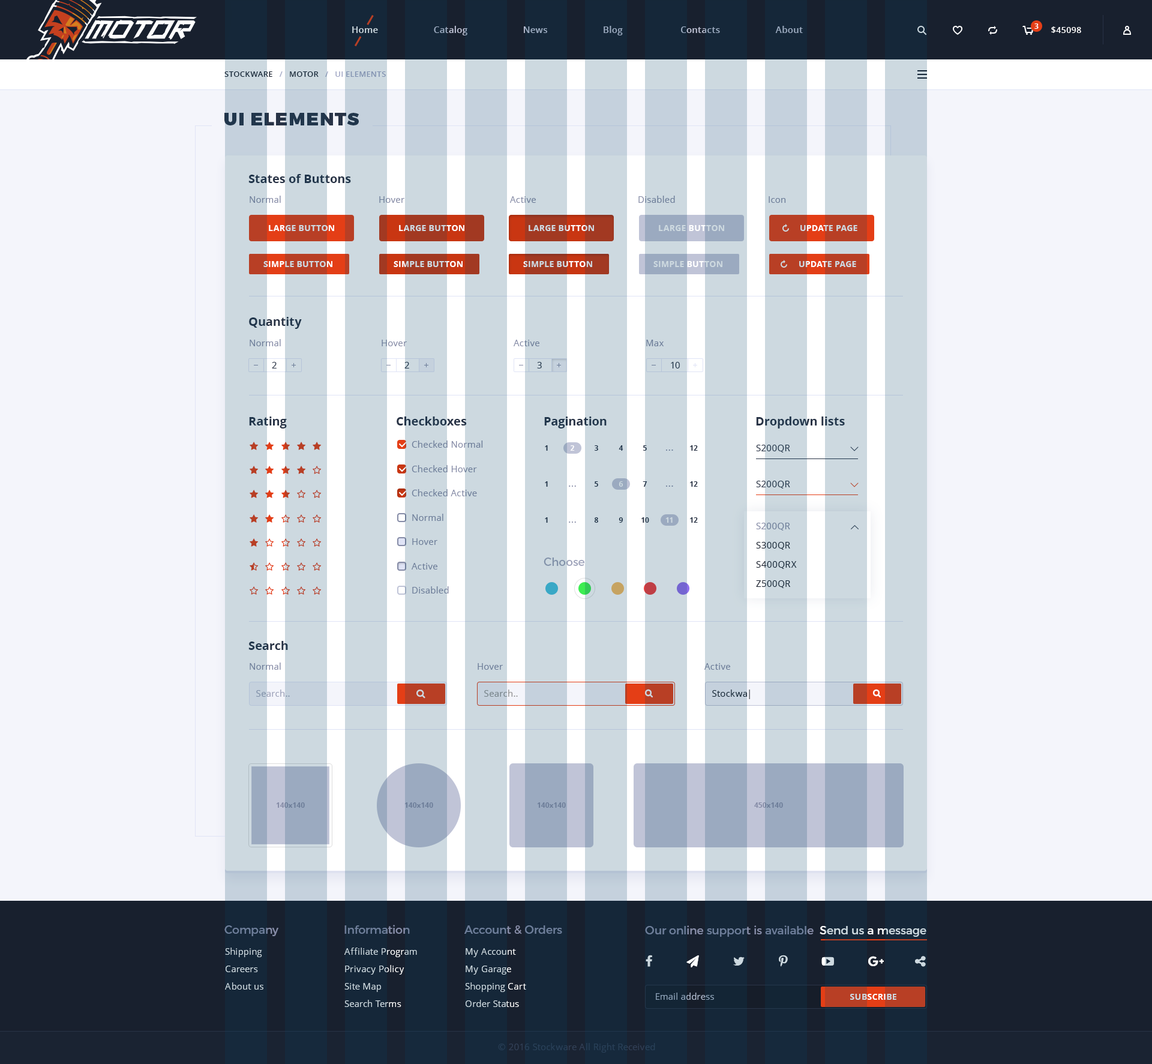
<style>
.page{position:relative;width:1152px;height:1064px;background:#f4f5fb}
.page>*{position:absolute;margin:0}
.t1{font:9px "OpenSans-Semibold";letter-spacing:0.02em}
.t2{font:7.2px "OpenSans-Bold";color:#ffffff}
.t3{font:8.4px "OpenSans-Semibold";letter-spacing:0.02em;color:#ffffff;text-transform:uppercase}
.t4{font:7.8px "OpenSans-Semibold";letter-spacing:0.02em;text-transform:uppercase}
.t5{font:18px "Montserrat-Black";letter-spacing:0.06em;color:#283346;text-transform:uppercase}
.t6{font:12px "OpenSans-Bold";color:#283346}
.t7{font:9px "OpenSans";letter-spacing:0.02em}
.t8{font:9px "OpenSans";letter-spacing:0.02em;color:#868ca7}
.t9{font:9px "OpenSans";letter-spacing:0.02em;color:#6d7d99}
.t10{font:8.4px "OpenSans-Bold";letter-spacing:0.02em;text-transform:uppercase}
.t11{font:8.4px "OpenSans-Bold";letter-spacing:0.02em;color:#cdd9e0;text-transform:uppercase}
.t12{font:8.4px "OpenSans-Bold";letter-spacing:0.02em}
.t13{font:8.4px "OpenSans-Bold";letter-spacing:0.02em;color:#cdd9e0}
.t14{font:9px "OpenSans";letter-spacing:0.02em;color:#283346}
.t15{font:7.2px "OpenSans-Bold";letter-spacing:0.02em;color:#283346;text-transform:uppercase}
.t16{font:7.2px "OpenSans-Bold";letter-spacing:0.02em;color:#ffffff;text-transform:uppercase}
.t17{font:7.2px "OpenSans-Bold";letter-spacing:0.1em;color:#6d7d99;text-transform:uppercase}
.t18{font:7.2px "OpenSans-Bold";letter-spacing:0.1em;color:#868ca7;text-transform:uppercase}
.t19{font:7.2px "OpenSans-Bold";letter-spacing:0.02em;color:#cdd9e0;text-transform:uppercase}
.t20{font:9px/19.2px "OpenSans";letter-spacing:0.02em;color:#18202e}
.t21{font:9px/19.2px "OpenSans";letter-spacing:0.02em;color:#868ca7}
.t22{font:11.4px "Montserrat-Regular"}
.t23{font:9px "OpenSans";letter-spacing:0.02em;color:#909ab2}
.t24{font:9px "OpenSans";letter-spacing:0.02em;color:#78848a}
.t25{font:9px "OpenSans";letter-spacing:0.02em;color:#161d29}
.t26{font:7.2px "OpenSans-Bold"}
.t27{font:7.2px "OpenSans-Bold";color:#6d7d99}
.t28{font:11.4px "Montserrat-Regular";color:#6d7d99}
.t29{font:9px/17.4px "OpenSans";letter-spacing:0.02em;color:#cdd9e0}
.t30{font:9px "OpenSans";letter-spacing:0.02em;color:#324057}
</style>
<div class="page">
<p class="t1" style="left:352px;top:26px;width:451px;height:9px">Home                      Catalog                      News                      Blog                       Contacts                      About</p>
<p class="t2" style="left:1034px;top:23px;width:5px;height:6px">3</p>
<p class="t3" style="left:1051px;top:26px;width:30px;height:7px">$45098</p>
<p class="t4" style="left:224px;top:71px;width:162px;height:6px">Stockware   /   Motor   /   UI Elements</p>
<p class="t5" style="left:224px;top:113px;width:135px;height:12px">ui elements</p>
<p class="t6" style="left:248px;top:174px;width:103px;height:9px">States of Buttons</p>
<p class="t7" style="left:250px;top:196px;width:31px;height:7px">Normal</p>
<p class="t8" style="left:379px;top:196px;width:25px;height:7px">Hover</p>
<p class="t8" style="left:510px;top:196px;width:26px;height:7px">Active</p>
<p class="t9" style="left:638px;top:196px;width:37px;height:7px">Disabled</p>
<p class="t9" style="left:769px;top:196px;width:17px;height:7px">Icon</p>
<p class="t10" style="left:269px;top:225px;width:65px;height:6px">large button</p>
<p class="t10" style="left:399px;top:225px;width:65px;height:6px">large button</p>
<p class="t11" style="left:529px;top:225px;width:65px;height:6px">large button</p>
<p class="t11" style="left:659px;top:225px;width:65px;height:6px">large button</p>
<p class="t10" style="left:800px;top:225px;width:57px;height:6px">UPDATE page</p>
<p class="t12" style="left:263px;top:261px;width:69px;height:6px">SIMPLE BUTTON</p>
<p class="t12" style="left:394px;top:261px;width:69px;height:6px">SIMPLE BUTTON</p>
<p class="t12" style="left:523px;top:261px;width:69px;height:6px">SIMPLE BUTTON</p>
<p class="t13" style="left:653px;top:261px;width:69px;height:6px">SIMPLE BUTTON</p>
<p class="t10" style="left:799px;top:261px;width:57px;height:6px">UPDATE page</p>
<p class="t6" style="left:249px;top:317px;width:53px;height:12px">Quantity</p>
<p class="t7" style="left:250px;top:339px;width:31px;height:7px">Normal</p>
<p class="t8" style="left:382px;top:340px;width:25px;height:6px">Hover</p>
<p class="t7" style="left:514px;top:340px;width:25px;height:6px">Active</p>
<p class="t9" style="left:646px;top:340px;width:18px;height:6px">Max</p>
<p class="t14" style="left:272px;top:362px;width:5px;height:6px">2</p>
<p class="t14" style="left:404px;top:362px;width:5px;height:6px">2</p>
<p class="t14" style="left:537px;top:362px;width:5px;height:6px">3</p>
<p class="t14" style="left:671px;top:362px;width:9px;height:6px">10</p>
<p class="t6" style="left:249px;top:416px;width:38px;height:12px">Rating</p>
<p class="t6" style="left:397px;top:416px;width:70px;height:9px">Checkboxes</p>
<p class="t6" style="left:544px;top:416px;width:63px;height:12px">Pagination</p>
<p class="t6" style="left:756px;top:416px;width:89px;height:12px">Dropdown lists</p>
<p class="t9" style="left:412px;top:440px;width:71px;height:8px">Checked Normal</p>
<p class="t15" style="left:545px;top:445px;width:3px;height:6px">1</p>
<p class="t16" style="left:570px;top:445px;width:5px;height:6px">2</p>
<p class="t15" style="left:595px;top:445px;width:3px;height:6px">3</p>
<p class="t15" style="left:619px;top:445px;width:4px;height:6px">4</p>
<p class="t15" style="left:643px;top:445px;width:4px;height:6px">5</p>
<p class="t17" style="left:666px;top:449px;width:7px;height:2px">...</p>
<p class="t15" style="left:690px;top:445px;width:8px;height:6px">12</p>
<p class="t14" style="left:756px;top:445px;width:34px;height:7px">S200QR</p>
<p class="t9" style="left:412px;top:465px;width:65px;height:7px">Checked Hover</p>
<p class="t15" style="left:545px;top:481px;width:3px;height:6px">1</p>
<p class="t18" style="left:569px;top:485px;width:7px;height:2px">...</p>
<p class="t15" style="left:595px;top:481px;width:3px;height:6px">5</p>
<p class="t19" style="left:619px;top:481px;width:4px;height:6px">6</p>
<p class="t15" style="left:643px;top:481px;width:4px;height:6px">7</p>
<p class="t17" style="left:666px;top:485px;width:7px;height:2px">...</p>
<p class="t15" style="left:690px;top:481px;width:8px;height:6px">12</p>
<p class="t14" style="left:756px;top:481px;width:34px;height:7px">S200QR</p>
<p class="t9" style="left:412px;top:489px;width:65px;height:7px">Checked Active</p>
<p class="t9" style="left:412px;top:514px;width:31px;height:7px">Normal</p>
<p class="t15" style="left:545px;top:517px;width:3px;height:6px">1</p>
<p class="t18" style="left:569px;top:521px;width:7px;height:2px">...</p>
<p class="t15" style="left:594px;top:517px;width:4px;height:6px">8</p>
<p class="t15" style="left:619px;top:517px;width:4px;height:6px">9</p>
<p class="t15" style="left:641px;top:517px;width:8px;height:6px">10</p>
<p class="t19" style="left:665px;top:517px;width:8px;height:6px">11</p>
<p class="t15" style="left:690px;top:517px;width:8px;height:6px">12</p>
<p class="t20" style="left:756px;top:523px;width:41px;height:65px"><span class="t21">S200QR<br></span>S300QR<br>S400QRX<br>Z500QR</p>
<p class="t9" style="left:412px;top:538px;width:25px;height:7px">Hover</p>
<p class="t22" style="left:544px;top:557px;width:40px;height:9px">Choose</p>
<p class="t9" style="left:412px;top:563px;width:25px;height:6px">Active</p>
<p class="t9" style="left:412px;top:586px;width:37px;height:7px">Disabled</p>
<p class="t6" style="left:248px;top:641px;width:40px;height:9px">Search</p>
<p class="t7" style="left:250px;top:662px;width:31px;height:8px">Normal</p>
<p class="t9" style="left:478px;top:663px;width:25px;height:7px">Hover</p>
<p class="t9" style="left:704px;top:663px;width:26px;height:7px">Active</p>
<p class="t23" style="left:256px;top:689px;width:34px;height:8px">Search..</p>
<p class="t24" style="left:484px;top:689px;width:34px;height:8px">Search..</p>
<p class="t25" style="left:712px;top:689px;width:38px;height:10px">Stockwa|</p>
<p class="t26" style="left:276px;top:802px;width:29px;height:6px">140x140</p>
<p class="t27" style="left:404px;top:802px;width:29px;height:6px">140x140</p>
<p class="t27" style="left:537px;top:802px;width:29px;height:6px">140x140</p>
<p class="t26" style="left:754px;top:802px;width:29px;height:6px">450x140</p>
<p class="t28" style="left:224px;top:925px;width:54px;height:11px">Company</p>
<p class="t28" style="left:344px;top:925px;width:66px;height:9px">Information</p>
<p class="t28" style="left:464px;top:925px;width:98px;height:9px">Account &amp; Orders</p>
<p class="t22" style="left:645px;top:925px;width:281px;height:12px">Our online support is available  Send us a message</p>
<p class="t29" style="left:225px;top:947px;width:38px;height:42px">Shipping<br>Careers<br>About us</p>
<p class="t29" style="left:344px;top:947px;width:73px;height:60px">Affiliate Program<br>Privacy Policy<br>Site Map<br>Search Terms</p>
<p class="t29" style="left:465px;top:948px;width:61px;height:59px">My Account<br>My Garage<br>Shopping Cart<br>Order Status</p>
<p class="t7" style="left:656px;top:992px;width:58px;height:8px">Email address</p>
<p class="t12" style="left:850px;top:994px;width:46px;height:6px">SUBSCRIBE</p>
<p class="t30" style="left:498px;top:1043px;width:157px;height:9px">© 2016 Stockware All Right Received</p>
</div>
